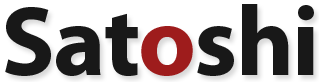
<style>
.page{position:relative;width:319px;height:82px;background:#ffffff}
.page>*{position:absolute;margin:0}
.t1{font:100px "MyriadPro-Bold";letter-spacing:-0.02em;color:#181818}
.t2{font:100px "MyriadPro-Bold";letter-spacing:-0.02em;color:#9e1c1c}
</style>
<div class="page">
<p class="t1" style="left:5px;top:4px;width:309px;height:72px">Sat<span class="t2">o</span>shi</p>
</div>
